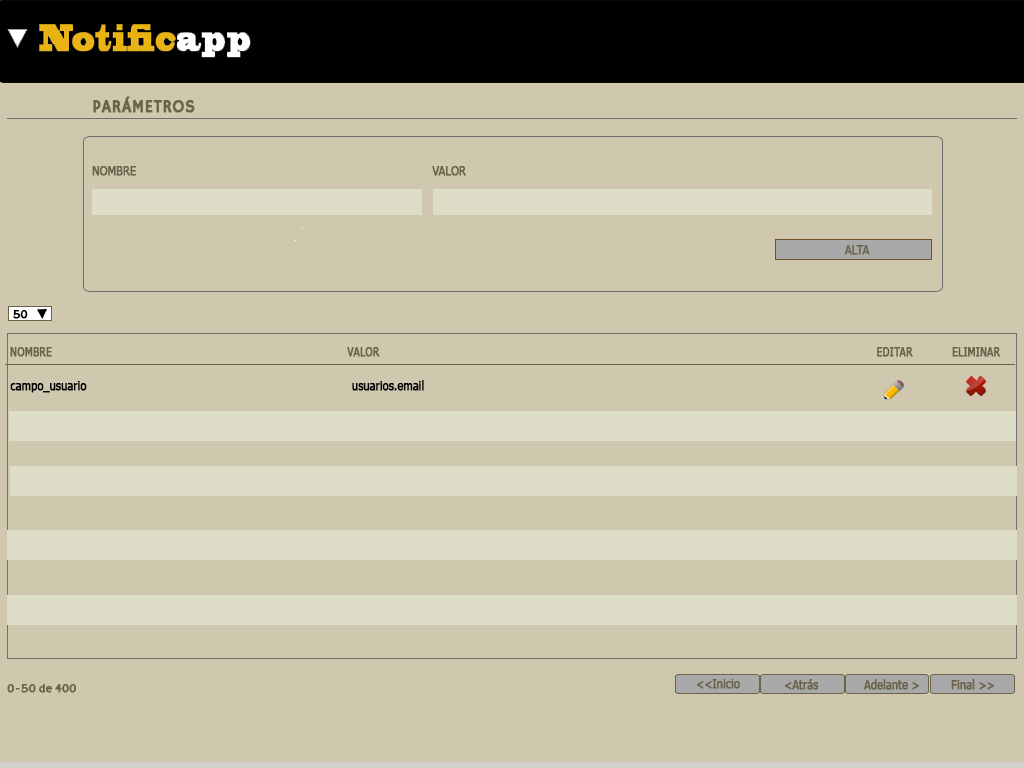
<style>
.page{position:relative;width:1024px;height:768px;background:#cfc8af}
.page>*{position:absolute;margin:0}
.t1{font:18px "HammersmithOne";color:#6c644a;font-weight:bold;scale:0.9 1}
.t2{font:12px "Tahoma";color:#6c644a;font-weight:bold;scale:0.9 1}
.t3{font:12px "HammersmithOne";color:#000000;font-weight:bold;scale:0.9 1}
.t4{font:12px "Tahoma";color:#6c644a;font-weight:bold;scale:0.86 1}
.t5{font:12px "Tahoma";color:#000000;font-weight:bold;scale:0.9 1}
.t6{font:12px "HammersmithOne";color:#6c644a;font-weight:bold;scale:0.9 1}
</style>
<div class="page">
<p class="t1" style="left:93px;top:96px;width:102px;height:17px">PARÁMETROS</p>
<p class="t2" style="left:92px;top:166px;width:44px;height:10px">NOMBRE</p>
<p class="t2" style="left:432px;top:166px;width:34px;height:10px">VALOR</p>
<p class="t2" style="left:844px;top:245px;width:26px;height:10px">ALTA</p>
<p class="t3" style="left:13px;top:310px;width:15px;height:9px">50</p>
<p class="t4" style="left:10px;top:347px;width:42px;height:10px">NOMBRE</p>
<p class="t4" style="left:347px;top:347px;width:33px;height:10px">VALOR</p>
<p class="t4" style="left:877px;top:347px;width:36px;height:10px">EDITAR</p>
<p class="t4" style="left:952px;top:347px;width:49px;height:10px">ELIMINAR</p>
<p class="t5" style="left:10px;top:381px;width:77px;height:12px">campo_usuario</p>
<p class="t5" style="left:352px;top:380px;width:72px;height:11px">usuarios.email</p>
<p class="t6" style="left:7px;top:684px;width:70px;height:9px">0-50 de 400</p>
<p class="t2" style="left:696px;top:679px;width:44px;height:10px">&lt;&lt;Inicio</p>
<p class="t2" style="left:784px;top:679px;width:35px;height:11px">&lt;Atrás</p>
<p class="t2" style="left:864px;top:679px;width:55px;height:11px">Adelante &gt;</p>
<p class="t2" style="left:951px;top:679px;width:43px;height:11px">Final &gt;&gt;</p>
</div>
